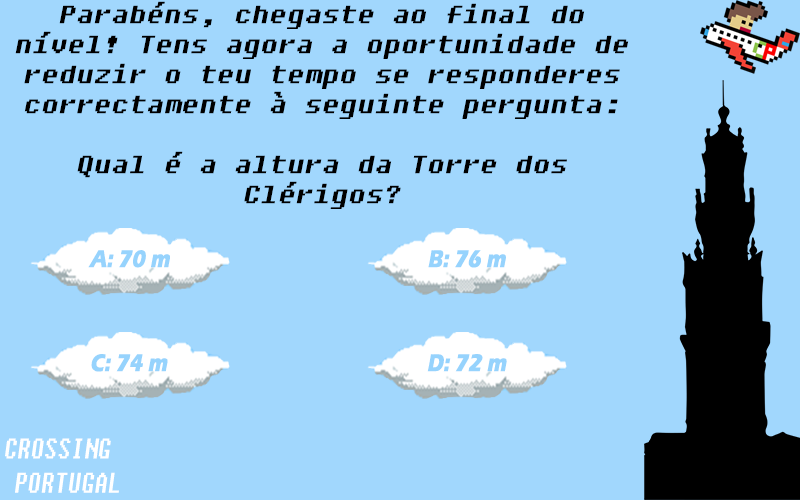
<style>
.page{position:relative;width:800px;height:500px;background:#a1d7fd}
.page>*{position:absolute;margin:0}
.t1{font:25px "Fixedsys";color:#000000;font-style:italic;scale:1.12 1}
.t2{font:25px "ErasITC-Bold";color:#96d3fd;font-style:italic;scale:0.83 1}
.t3{font:28.4px "Fixedsys";color:#ffffff;font-style:italic;scale:0.76 1}
</style>
<div class="page">
<p class="t1" style="left:15px;top:1px;width:614px;height:208px;text-align:center">Parabéns, chegaste ao final do nível! Tens agora a oportunidade de reduzir o teu tempo se responderes correctamente à seguinte pergunta: <br><br>Qual é a altura da Torre dos Clérigos?</p>
<p class="t2" style="left:88px;top:250px;width:82px;height:18px">A: 70 m</p>
<p class="t2" style="left:428px;top:250px;width:78px;height:18px">B: 76 m</p>
<p class="t2" style="left:91px;top:354px;width:77px;height:18px">C: 74 m</p>
<p class="t2" style="left:427px;top:354px;width:80px;height:18px">D: 72 m</p>
<p class="t3" style="left:5px;top:438px;width:114px;height:55px">CROSSING <br> PORTUGAL</p>
</div>
